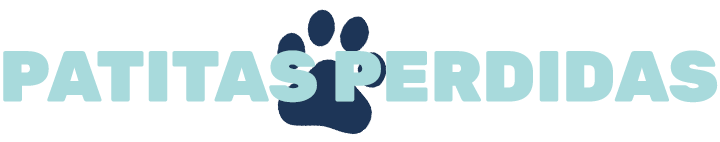
<style>
.page{position:relative;width:720px;height:142px;background:#ffffff}
.page>*{position:absolute;margin:0}
.t1{font:72px "RubikRoman-Black";color:#a8dadc}
</style>
<div class="page">
<p class="t1" style="left:3px;top:50px;width:715px;height:53px">PATITAS PERDIDAS</p>
</div>
